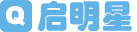
<style>
.page{position:relative;width:137px;height:32px;background:#61b3e6}
.page>*{position:absolute;margin:0}
.t1{font:24px "Arial-Black";letter-spacing:0.025em;color:#ffffff}
.t2{font:31.9px "STHupo";letter-spacing:0.025em;color:#61b3e6}
</style>
<div class="page">
<p class="t1" style="left:6px;top:6px;width:19px;height:20px">Q</p>
<p class="t2" style="left:38px;top:0px;width:94px;height:31px">启明星</p>
</div>
